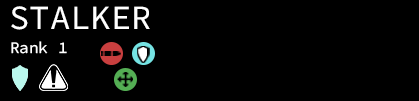
<style>
.page{position:relative;width:419px;height:101px;background:#000000}
.page>*{position:absolute;margin:0}
.t1{font:33.9px "SourceCodeVariable-Roman";color:#ffffff}
.t2{font:16px "SourceCodeVariable-Roman";color:#ffffff}
</style>
<div class="page">
<p class="t1" style="left:11px;top:6px;width:139px;height:24px">STALKER</p>
<p class="t2" style="left:11px;top:41px;width:56px;height:13px">Rank 1</p>
</div>
